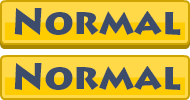
<style>
.page{position:relative;width:190px;height:100px;background:#ffd948}
.page>*{position:absolute;margin:0}
.t1{font:36px "LithosPro-Black";color:#3d4c6b}
</style>
<div class="page">
<p class="t1" style="left:14px;top:8px;width:167px;height:27px">Normal</p>
<p class="t1" style="left:14px;top:63px;width:167px;height:27px">Normal</p>
</div>
